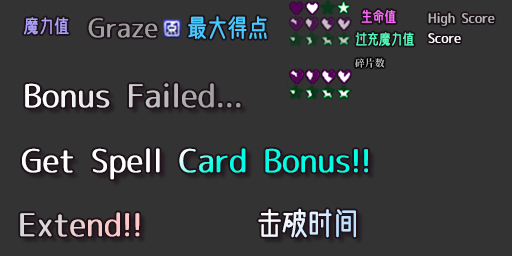
<style>
.page{position:relative;width:512px;height:256px;background:#333333}
.page>*{position:absolute;margin:0}
.t1{font:18px "WenCang-Regular";color:#aaa0f7}
.t2{font:24px "WenCang-Regular";color:#48caff}
.t3{font:14px "WenCang-Regular";color:#ff69fc}
.t4{font:13px "07LogoTypeGothic7";color:#b7b7b7}
.t5{font:26px "07LogoTypeGothic7";color:#9f9f9f}
.t6{font:14px "WenCang-Regular";color:#52fdbb}
.t7{font:13px "07LogoTypeGothic7";color:#ffffff}
.t8{font:32px "07LogoTypeGothic7"}
.t9{font:30px "WenCang-Regular"}
.t10{font:32px "07LogoTypeGothic7";color:#f3cdcd}
</style>
<div class="page">
<p class="t1" style="left:24px;top:17px;width:45px;height:18px">魔力值</p>
<p class="t2" style="left:188px;top:16px;width:79px;height:23px">最大得点</p>
<p class="t3" style="left:361px;top:9px;width:35px;height:15px">生命值</p>
<p class="t4" style="left:428px;top:13px;width:67px;height:13px">High Score</p>
<p class="t5" style="left:88px;top:18px;width:70px;height:20px">Graze</p>
<p class="t6" style="left:355px;top:32px;width:59px;height:14px">过充魔力值</p>
<p class="t7" style="left:428px;top:33px;width:33px;height:10px">Score</p>
<p class="t8" style="left:25px;top:83px;width:216px;height:25px">Bonus Failed...</p>
<p class="t8" style="left:22px;top:148px;width:346px;height:32px">Get Spell Card Bonus!!</p>
<p class="t9" style="left:258px;top:208px;width:98px;height:30px">击破时间</p>
<p class="t10" style="left:20px;top:212px;width:120px;height:25px">Extend!!</p>
</div>
